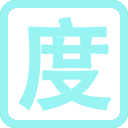
<style>
.page{position:relative;width:128px;height:128px;background:#97f4f3}
.page>*{position:absolute;margin:0}
.t1{font:100px "AdobeHeitiStd-Regular";color:#97f4f3;font-weight:bold}
</style>
<div class="page">
<p class="t1" style="left:18px;top:17px;width:93px;height:94px">度</p>
</div>
